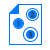
<style>
.page{position:relative;width:50px;height:50px;background:#ffffff}
.page>*{position:absolute;margin:0}
.t1{font:7px "SegoeUI";color:#2b2b2b}
.t2{font:7px "SegoeUI"}
</style>
<div class="page">
<p class="t1" style="left:30px;top:12px;width:5px;height:6px">2</p>
<p class="t2" style="left:17px;top:21px;width:3px;height:6px">1</p>
<p class="t1" style="left:29px;top:32px;width:3px;height:6px">3</p>
</div>
